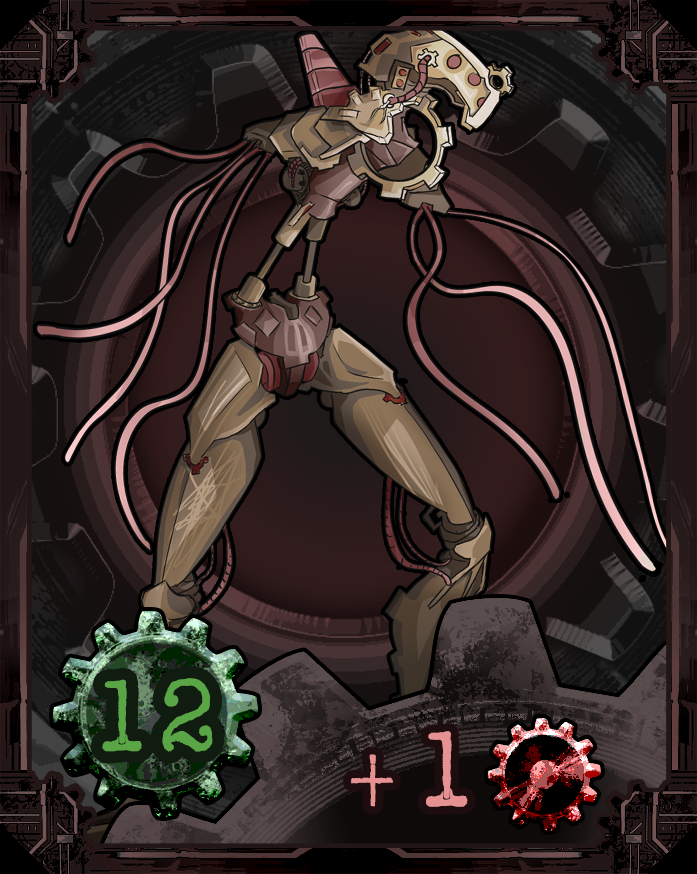
<style>
.page{position:relative;width:697px;height:874px}
.page>*{position:absolute;margin:0}
.t1{font:108.3px "AmerTypewriterITCbyBT-Medium";color:#5aa647}
.t2{font:85.8px "AmerTypewriterITCbyBT-Medium";color:#e69192}
.t3{font:114.4px "AmerTypewriterITCbyBT-Medium";color:#e69192}
</style>
<div class="page">
<p class="t1" style="left:102px;top:678px;width:111px;height:74px">12</p>
<p class="t2" style="left:350px;top:731px;width:118px;height:76px">+<span class="t3">1</span></p>
</div>
